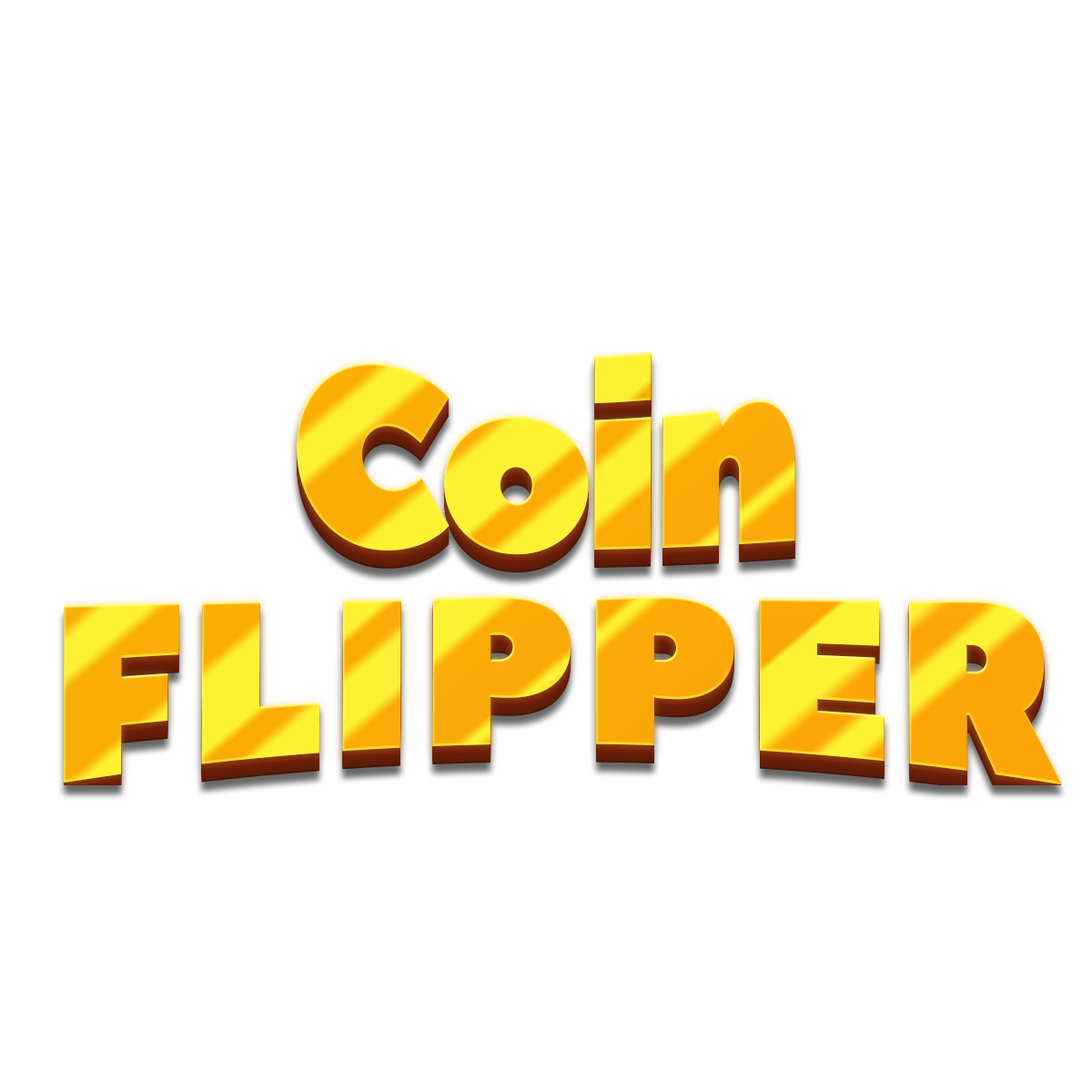
<style>
.page{position:relative;width:1092px;height:1092px;background:#ffffff}
.page>*{position:absolute;margin:0}
.t1{font:269.8px "PeaceSans";letter-spacing:-0.05em;scale:0.87 1}
.t2{font:255px "PeaceSans";letter-spacing:0.025em;scale:0.87 1}
</style>
<div class="page">
<p class="t1" style="left:297px;top:352px;width:498px;height:203px">Coin</p>
<p class="t2" style="left:64px;top:596px;width:998px;height:189px">FLIPPER</p>
</div>
